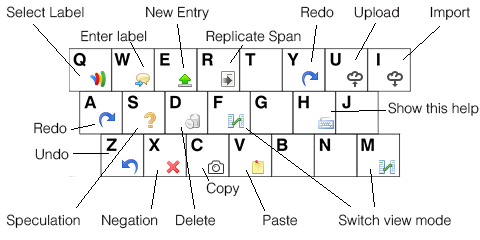
<style>
.page{position:relative;width:480px;height:240px;background:#ffffff}
.page>*{position:absolute;margin:0}
.t1{font:14px "Helvetica-Light";color:#040000}
.t2{font:14px "Helvetica-Light"}
</style>
<div class="page">
<p class="t1" style="left:6px;top:6px;width:78px;height:12px">Select Label</p>
<p class="t1" style="left:146px;top:6px;width:63px;height:14px">New Entry</p>
<p class="t1" style="left:301px;top:6px;width:33px;height:12px">Redo</p>
<p class="t1" style="left:354px;top:6px;width:45px;height:14px">Upload</p>
<p class="t1" style="left:430px;top:6px;width:40px;height:14px">Import</p>
<p class="t1" style="left:81px;top:30px;width:66px;height:12px">Enter label</p>
<p class="t1" style="left:206px;top:30px;width:95px;height:14px">Replicate Span</p>
<p class="t1" style="left:388px;top:102px;width:91px;height:14px">Show this help</p>
<p class="t1" style="left:34px;top:122px;width:33px;height:12px">Redo</p>
<p class="t1" style="left:35px;top:148px;width:34px;height:12px">Undo</p>
<p class="t1" style="left:206px;top:182px;width:34px;height:14px">Copy</p>
<p class="t1" style="left:6px;top:214px;width:74px;height:14px">Speculation</p>
<p class="t1" style="left:102px;top:214px;width:56px;height:15px">Negation</p>
<p class="t2" style="left:176px;top:214px;width:40px;height:12px">Delete</p>
<p class="t2" style="left:263px;top:214px;width:35px;height:12px">Paste</p>
<p class="t1" style="left:338px;top:214px;width:113px;height:12px">Switch view mode</p>
</div>
